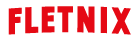
<style>
.page{position:relative;width:138px;height:40px;background:#ffffff}
.page>*{position:absolute;margin:0}
.t1{font:37px "BOMB";letter-spacing:0.01em;color:#e50914;text-transform:uppercase}
</style>
<div class="page">
<p class="t1" style="left:8px;top:6px;width:123px;height:29px">FLetNix</p>
</div>
